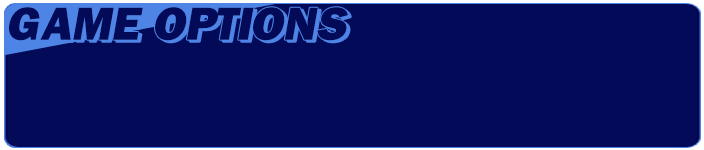
<style>
.page{position:relative;width:704px;height:150px;background:#030a58}
.page>*{position:absolute;margin:0}
.t1{font:48px "FranklinGothic-Heavy";letter-spacing:0.05em;color:#030a58;font-style:italic}
</style>
<div class="page">
<p class="t1" style="left:9px;top:7px;width:339px;height:34px">GAME OPTIONS</p>
</div>
